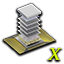
<style>
.page{position:relative;width:64px;height:64px;background:#ffffff}
.page>*{position:absolute;margin:0}
.t1{font:16px "TrajanPro-Bold";color:#deff01;font-style:italic}
</style>
<div class="page">
<p class="t1" style="left:47px;top:48px;width:15px;height:12px">X</p>
</div>
